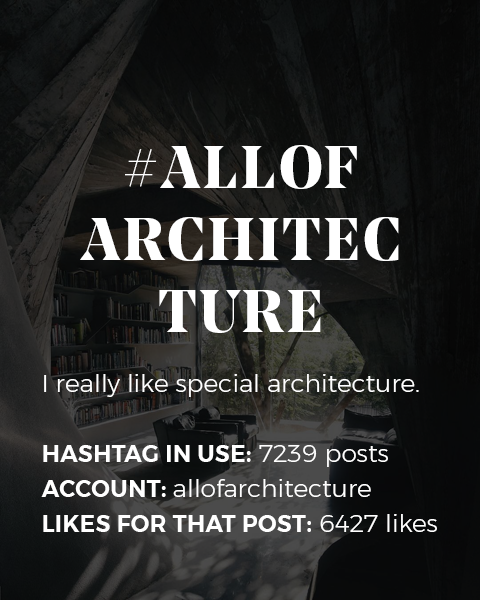
<style>
.page{position:relative;width:480px;height:600px}
.page>*{position:absolute;margin:0}
.t1{font:25px "Montserrat-Light";color:#ffffff}
.t2{font:60px "NoeDisplay-Bold";letter-spacing:0.05em;color:#ffffff;text-transform:uppercase}
.t3{font:23px/35px "Montserrat-SemiBold";letter-spacing:0.02em;color:#ffffff;text-transform:uppercase}
.t4{font:25px/35px "Montserrat-Light";color:#ffffff}
.t5{font:23px/35px "Montserrat-SemiBold";letter-spacing:0.02em;color:#ffffff}
</style>
<div class="page">
<p class="t1" style="left:41px;top:145px;width:396px;height:387px;text-align:center"><span class="t2">#allof <br>architec ture<br></span><br>I really like special architecture.<br><br><span class="t3">Hashtag in use:</span><span class="t4"> 7239 posts<br></span><span class="t5">ACCOUNT: </span><span class="t4">allofarchitecture<br></span><span class="t3">Likes for that post:</span><span class="t4"> 6427 likes</span></p>
</div>
